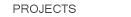
<style>
.page{position:relative;width:131px;height:17px;background:#ffffff}
.page>*{position:absolute;margin:0}
.t1{font:19px "Kartika";color:#404040}
</style>
<div class="page">
<p class="t1" style="left:13px;top:4px;width:63px;height:9px">PROJECTS</p>
</div>
